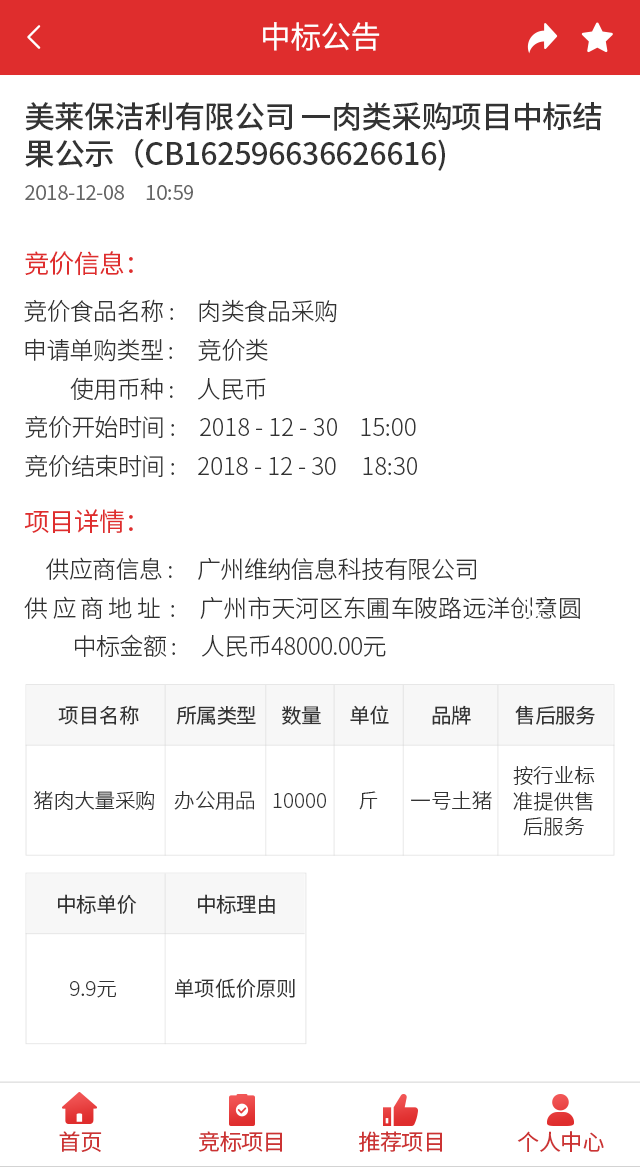
<style>
.page{position:relative;width:640px;height:1167px;background:#ffffff}
.page>*{position:absolute;margin:0}
.t1{font:30.7px "SourceHanSansCN-Regular";letter-spacing:-0.02em;color:#ffffff}
.t2{font:30.7px "SourceHanSansCN-Medium";letter-spacing:-0.02em;color:#333333}
.t3{font:20.5px "SourceHanSansCN-Normal";letter-spacing:-0.02em;color:#666666}
.t4{font:25.6px "SourceHanSansCN-Normal";letter-spacing:-0.02em;color:#df2d2d}
.t5{font:23.9px "SourceHanSansCN-Light";letter-spacing:-0.02em;color:#333333}
.t6{font:23.9px "SourceHanSansCN-Light";color:#333333}
.t7{font:23.9px "SourceHanSansCN-Light";letter-spacing:0.18em;color:#333333}
.t8{font:20.5px "SourceHanSansCN-Regular";letter-spacing:-0.02em;color:#333333}
.t9{font:20.5px/25.6px "SourceHanSansCN-Light";color:#333333}
.t10{font:20.5px "SourceHanSansCN-Light";color:#333333}
.t11{font:20.5px "SourceHanSansCN-Normal";color:#333333}
.t12{font:22.2px "SourceHanSansCN-Regular";letter-spacing:-0.02em;color:#cc3333}
</style>
<div class="page">
<p class="t1" style="left:263px;top:22px;width:117px;height:29px">中标公告</p>
<p class="t2" style="left:25px;top:102px;width:577px;height:69px">美莱保洁利有限公司 一肉类采购项目中标结<br>果公示（CB162596636626616)</p>
<p class="t3" style="left:25px;top:185px;width:168px;height:15px">2018-12-08     10:59</p>
<p class="t4" style="left:25px;top:251px;width:108px;height:25px">竞价信息：</p>
<p class="t5" style="left:24px;top:299px;width:313px;height:24px">竞价食品名称 :    肉类食品采购</p>
<p class="t5" style="left:25px;top:338px;width:243px;height:24px">申请单购类型 :     竞价类</p>
<p class="t5" style="left:70px;top:377px;width:196px;height:23px">使用币种 :     人民币</p>
<p class="t6" style="left:25px;top:415px;width:391px;height:24px"><span class="t5">竞价开始时间 :    </span>2018 - 12 - 30    15:00</p>
<p class="t6" style="left:25px;top:454px;width:392px;height:24px"><span class="t5">竞价结束时间 :    </span>2018 - 12 - 30    18:30</p>
<p class="t4" style="left:24px;top:509px;width:109px;height:24px">项目详情：</p>
<p class="t5" style="left:46px;top:557px;width:430px;height:24px">供应商信息 :     广州维纳信息科技有限公司</p>
<p class="t6" style="left:24px;top:596px;width:556px;height:24px"><span class="t7">供应商地址</span><span class="t5"> :     </span>广州市天河区东圃车陂路远洋创意圆</p>
<p class="t5" style="left:75px;top:634px;width:311px;height:23px">中标金额 :     人民币48000.00元</p>
<p class="t8" style="left:58px;top:705px;width:81px;height:20px">项目名称</p>
<p class="t8" style="left:176px;top:705px;width:80px;height:20px">所属类型</p>
<p class="t8" style="left:282px;top:705px;width:39px;height:20px">数量</p>
<p class="t8" style="left:350px;top:705px;width:39px;height:20px">单位</p>
<p class="t8" style="left:432px;top:705px;width:39px;height:20px">品牌</p>
<p class="t8" style="left:515px;top:705px;width:80px;height:20px">售后服务</p>
<p class="t9" style="left:513px;top:766px;width:82px;height:70px;text-align:center">按行业标<br>准提供售<br>后服务</p>
<p class="t10" style="left:33px;top:791px;width:121px;height:19px">猪肉大量采购</p>
<p class="t10" style="left:174px;top:791px;width:80px;height:19px">办公用品</p>
<p class="t10" style="left:273px;top:793px;width:53px;height:15px">10000</p>
<p class="t10" style="left:359px;top:791px;width:19px;height:19px">斤</p>
<p class="t10" style="left:411px;top:791px;width:81px;height:19px">一号土猪</p>
<p class="t8" style="left:58px;top:894px;width:79px;height:20px">中标单价</p>
<p class="t8" style="left:198px;top:894px;width:77px;height:20px">中标理由</p>
<p class="t10" style="left:70px;top:981px;width:46px;height:17px">9.9元</p>
<p class="t11" style="left:175px;top:978px;width:120px;height:20px">单项低价原则</p>
<p class="t12" style="left:59px;top:1131px;width:43px;height:21px">首页</p>
<p class="t12" style="left:199px;top:1131px;width:83px;height:21px">竞标项目</p>
<p class="t12" style="left:359px;top:1131px;width:83px;height:21px">推荐项目</p>
<p class="t12" style="left:517px;top:1131px;width:87px;height:21px">个人中心</p>
</div>
